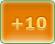
<style>
.page{position:relative;width:55px;height:44px}
.page>*{position:absolute;margin:0}
.t1{font:16px "Verdana-Bold";color:#fbd366}
</style>
<div class="page">
<p class="t1" style="left:12px;top:17px;width:35px;height:13px">+10</p>
</div>
